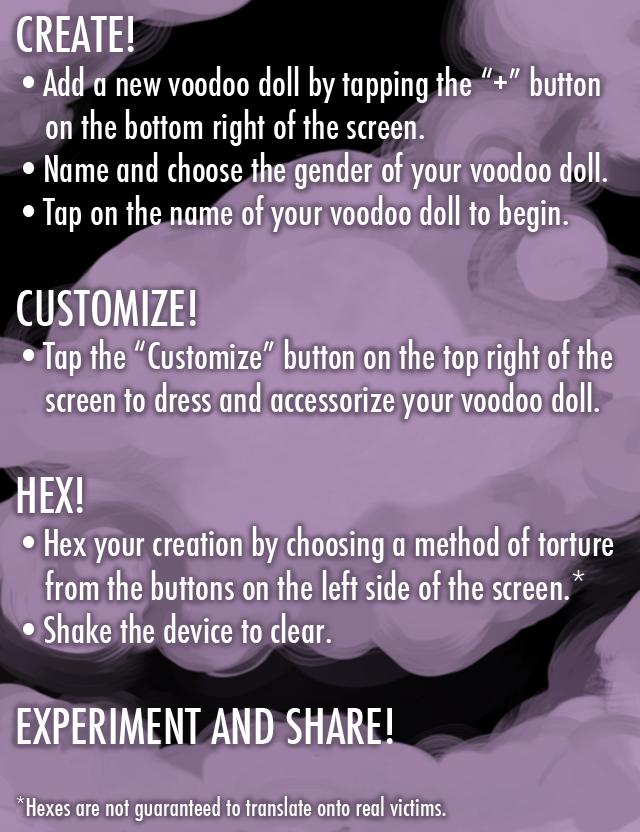
<style>
.page{position:relative;width:640px;height:832px}
.page>*{position:absolute;margin:0}
.t1{font:36px "Futura-CondensedMedium";color:#ffffff}
.t2{font:48px "Futura-CondensedMedium";color:#ffffff}
.t3{font:24px "Futura-CondensedMedium";color:#ffffff}
</style>
<div class="page">
<p class="t1" style="left:16px;top:16px;width:598px;height:805px"><span class="t2">CREATE!<br></span>•Add a new voodoo doll by tapping the “+” button<br>    on the bottom right of the screen.<br>•Name and choose the gender of your voodoo doll.<br>•Tap on the name of your voodoo doll to begin.<br><br><span class="t2">CUSTOMIZE!<br></span>•Tap the “Customize” button on the top right of the <br>    screen to dress and accessorize your voodoo doll.<br><br><span class="t2">HEX!<br></span>•Hex your creation by choosing a method of torture <br>    from the buttons on the left side of the screen.*<br>•Shake the device to clear.<br><br><span class="t2">EXPERIMENT AND SHARE!<br><br></span><span class="t3">*Hexes are not guaranteed to translate onto real victims.</span></p>
</div>
